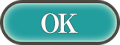
<style>
.page{position:relative;width:120px;height:45px}
.page>*{position:absolute;margin:0}
.t1{font:26px "RyuminPro-ExBold";letter-spacing:-0.08em;color:#fdfbf9}
</style>
<div class="page">
<p class="t1" style="left:41px;top:13px;width:37px;height:21px">OK</p>
</div>
